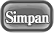
<style>
.page{position:relative;width:54px;height:33px}
.page>*{position:absolute;margin:0}
.t1{font:15px "RyuminPro-ExBold";letter-spacing:-0.08em;color:#ffffff;font-weight:bold;scale:0.9 1}
</style>
<div class="page">
<p class="t1" style="left:5px;top:11px;width:44px;height:15px">Simpan</p>
</div>
